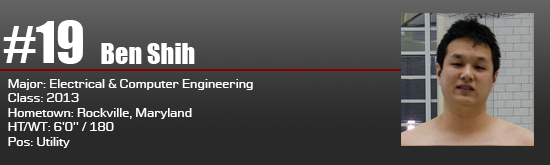
<style>
.page{position:relative;width:550px;height:165px}
.page>*{position:absolute;margin:0}
.t1{font:52.8px "Impact";color:#ffffff}
.t2{font:26.4px "Impact";color:#ffffff}
.t3{font:12px "Moire";color:#ffffff}
</style>
<div class="page">
<p class="t1" style="left:3px;top:20px;width:80px;height:44px">#19</p>
<p class="t2" style="left:101px;top:43px;width:94px;height:21px">Ben Shih</p>
<p class="t3" style="left:8px;top:79px;width:245px;height:69px">Major: Electrical &amp; Computer Engineering<br>Class: 2013<br>Hometown: Rockville, Maryland<br>HT/WT: 6'0'' / 180<br>Pos: Utility</p>
</div>
